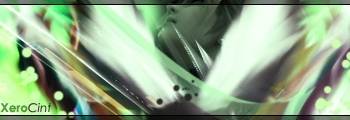
<style>
.page{position:relative;width:350px;height:120px}
.page>*{position:absolute;margin:0}
.t1{font:12px "CenturyGothic-Bold";color:#4d9f2d}
.t2{font:12px "CenturyGothic-Italic";color:#4e3541}
</style>
<div class="page">
<p class="t1" style="left:0px;top:103px;width:52px;height:10px">Xero<span class="t2">Cint</span></p>
</div>
